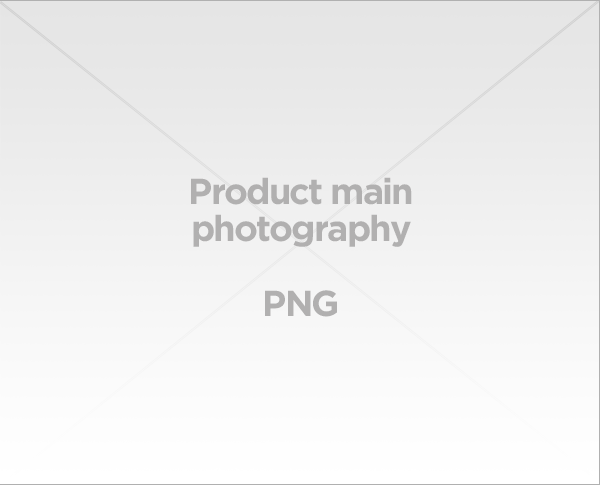
<style>
.page{position:relative;width:600px;height:485px}
.page>*{position:absolute;margin:0}
.t1{font:36.1px/37.5px "GothamBold";letter-spacing:-0.05em;color:#b1b0b0}
</style>
<div class="page">
<p class="t1" style="left:191px;top:177px;width:221px;height:140px;text-align:center">Product main<br>photography<br><br>PNG</p>
</div>
